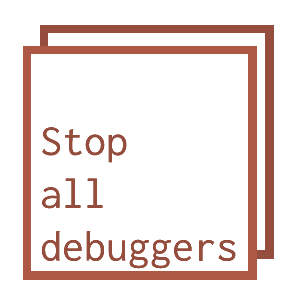
<style>
.page{position:relative;width:300px;height:300px;background:#ffffff}
.page>*{position:absolute;margin:0}
.t1{font:44px "Inconsolata-Regular";color:#954d3d}
</style>
<div class="page">
<p class="t1" style="left:41px;top:127px;width:195px;height:142px">Stop<br>all<br>debuggers</p>
</div>
